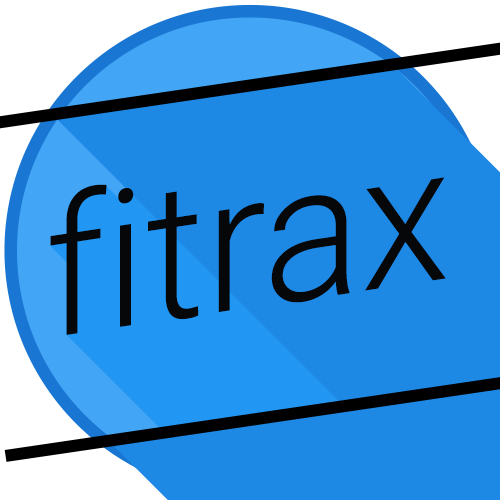
<style>
.page{position:relative;width:500px;height:500px;background:#1e88e5}
.page>*{position:absolute;margin:0}
.t1{font:191px "Roboto-Light";color:#060709;scale:0.97 1}
</style>
<div class="page">
<p class="t1" style="left:50px;top:177px;width:396px;height:158px;rotate:-9deg">fitrax</p>
</div>
